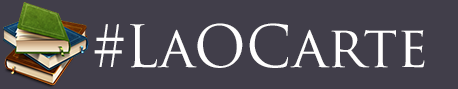
<style>
.page{position:relative;width:458px;height:89px;background:#413e4a}
.page>*{position:absolute;margin:0}
.t1{font:56.7px "TrajanPro-Regular";color:#fffffe}
</style>
<div class="page">
<p class="t1" style="left:94px;top:23px;width:331px;height:45px">#LaOCarte</p>
</div>
